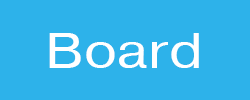
<style>
.page{position:relative;width:250px;height:100px;background:#2db2ea}
.page>*{position:absolute;margin:0}
.t1{font:48px "Helvetica";color:#ffffff;scale:1.2 1}
</style>
<div class="page">
<p class="t1" style="left:49px;top:33px;width:150px;height:35px">Board</p>
</div>
